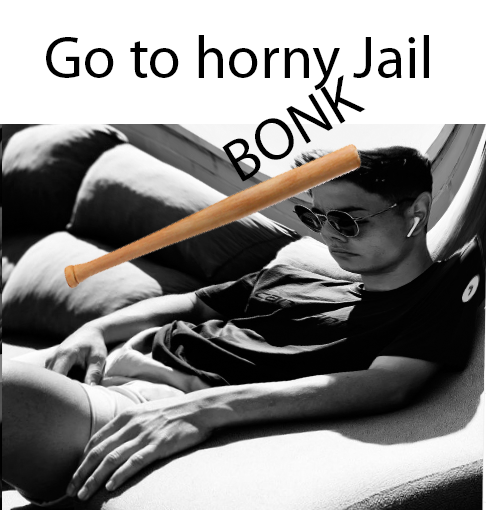
<style>
.page{position:relative;width:486px;height:510px;background:#ffffff}
.page>*{position:absolute;margin:0}
.t1{font:60px "MyriadPro-Regular";color:#000000}
</style>
<div class="page">
<p class="t1" style="left:46px;top:35px;width:383px;height:56px">Go to horny Jail</p>
<p class="t1" style="left:222px;top:75px;width:144px;height:107px;rotate:-31deg">BONK</p>
</div>
